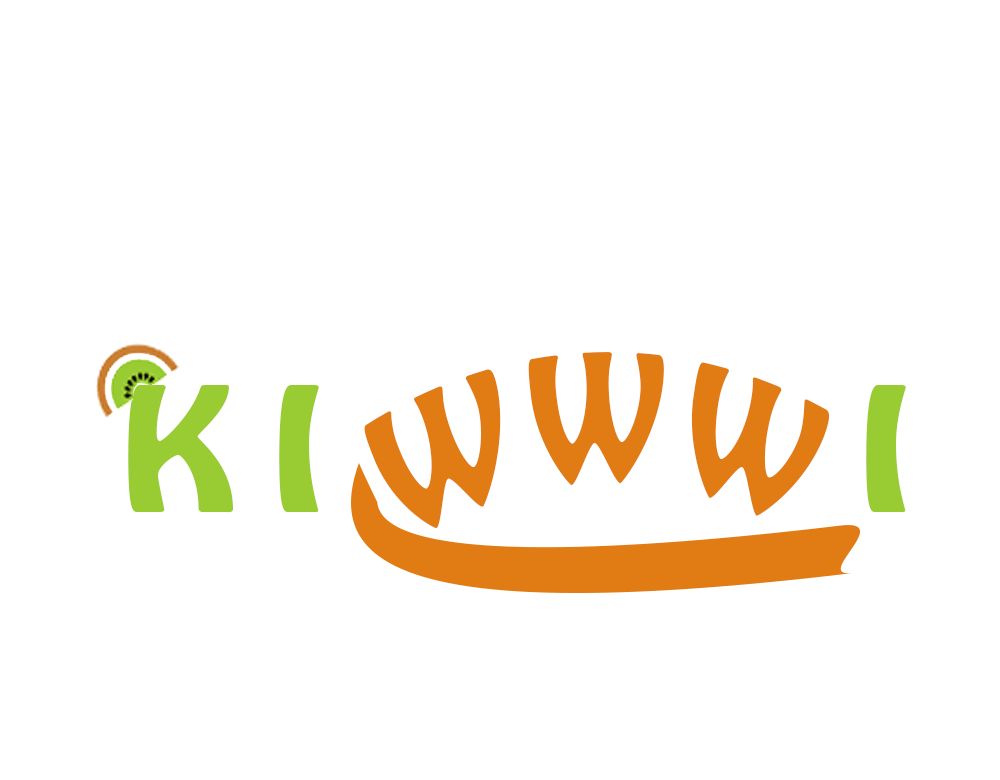
<style>
.page{position:relative;width:1000px;height:780px;background:#ffffff}
.page>*{position:absolute;margin:0}
.t1{font:153px "HoboStd";letter-spacing:0.16em;color:#e17b14;scale:0.8 1}
.t2{font:152.8px "HoboStd";letter-spacing:0.16em;color:#99cc33;scale:1.21 1}
</style>
<div class="page">
<p class="t1" style="left:364px;top:352px;width:466px;height:177px">WWW</p>
<p class="t2" style="left:128px;top:384px;width:778px;height:129px">KI      I</p>
</div>
